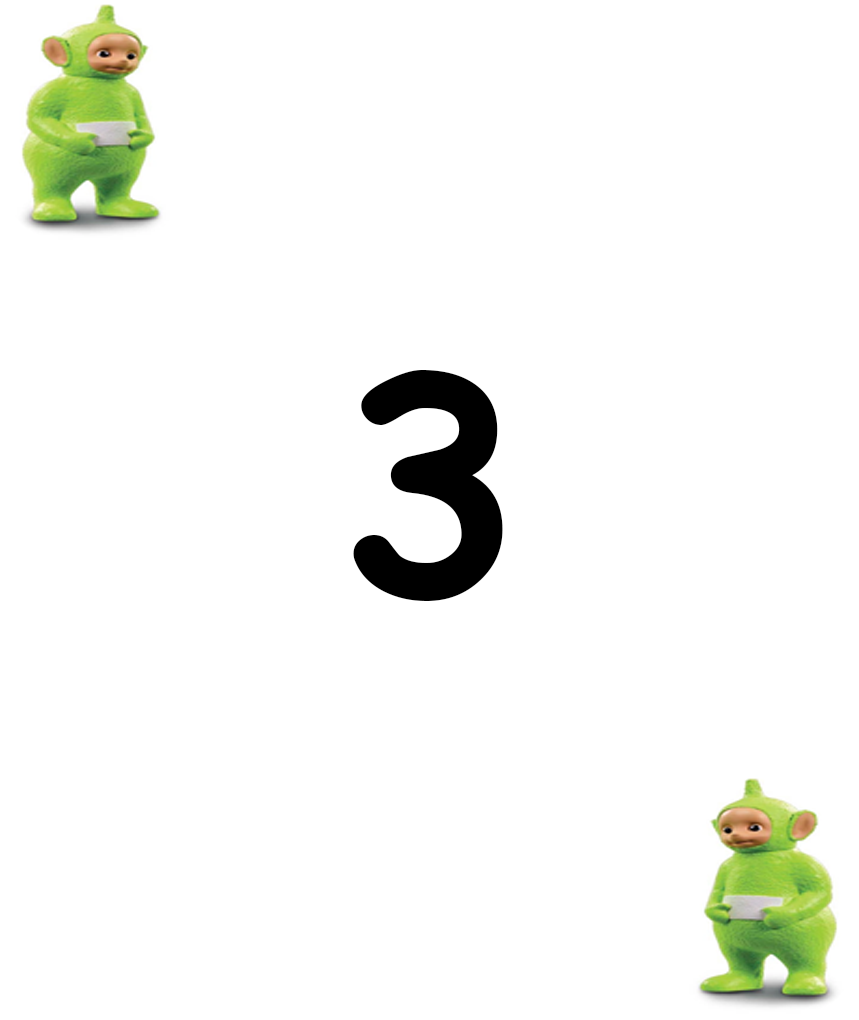
<style>
.page{position:relative;width:859px;height:1020px;background:#ffffff}
.page>*{position:absolute;margin:0}
.t1{font:300px "ComicSansMS-Bold";color:#000000;font-variant:small-caps}
</style>
<div class="page">
<p class="t1" style="left:353px;top:370px;width:150px;height:231px">3</p>
</div>
